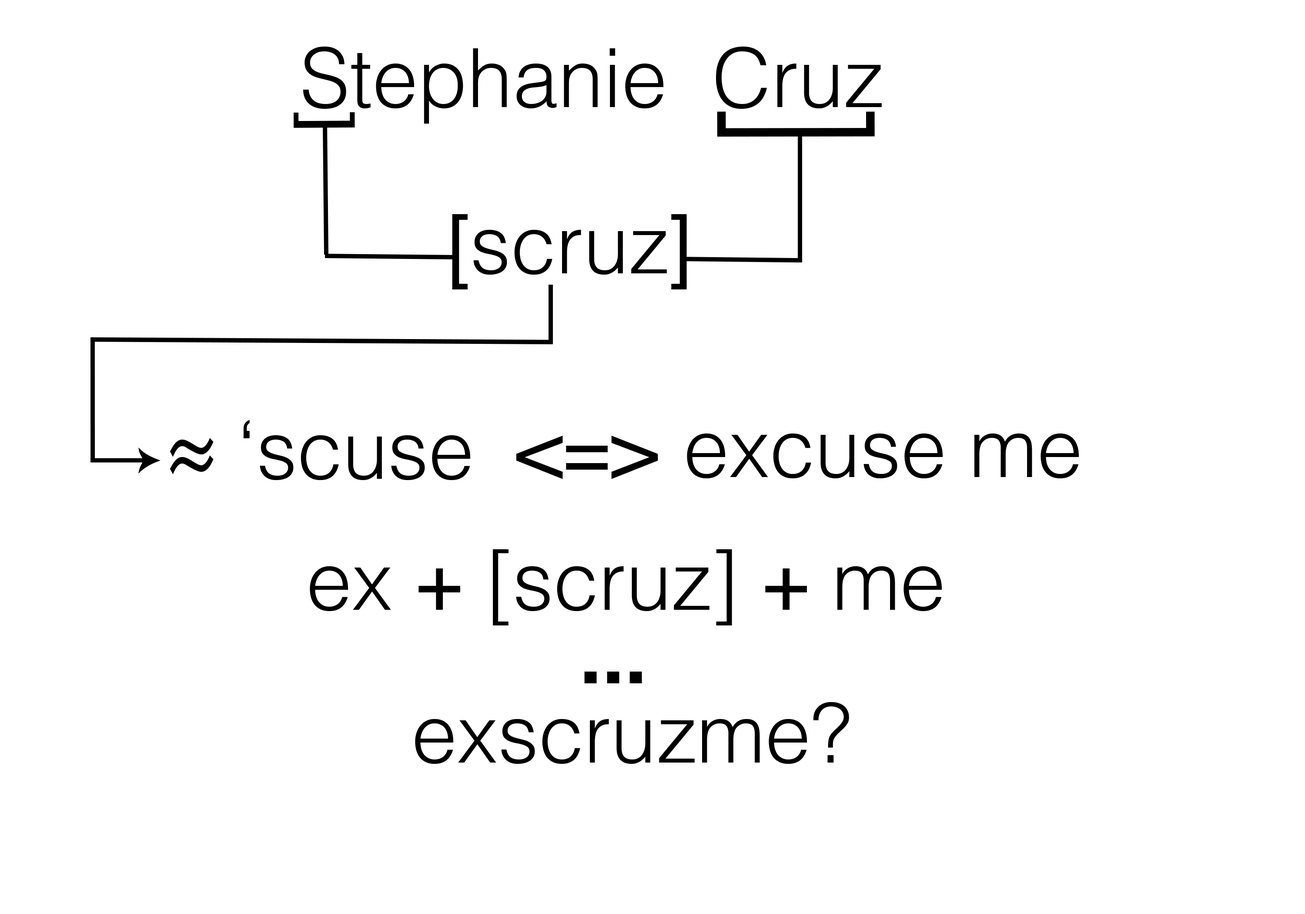
<style>
.page{position:relative;width:1305px;height:914px;background:#ffffff}
.page>*{position:absolute;margin:0}
.t1{font:81.6px "Helvetica-Light";color:#000000}
.t2{font:66.3px "Helvetica";color:#000000;scale:1.23 1}
.t3{font:169.2px "Helvetica-Light";color:#000000;scale:0.77 1}
.t4{font:81.6px "Helvetica";color:#000000}
.t5{font:113.7px "Helvetica-Light";color:#000000;scale:0.76 1}
.t6{font:81.6px "Helvetica-Bold";color:#000000}
</style>
<div class="page">
<p class="t1" style="left:303px;top:47px;width:579px;height:77px">Stephanie  Cruz</p>
<p class="t2" style="left:294px;top:112px;width:61px;height:16px;rotate:-90deg">[</p>
<p class="t3" style="left:717px;top:111px;width:158px;height:26px;rotate:90deg">]</p>
<p class="t1" style="left:452px;top:214px;width:235px;height:75px"><span class="t4">[</span>scruz<span class="t4">]</span></p>
<p class="t1" style="left:243px;top:420px;width:228px;height:60px">‘scuse</p>
<p class="t5" style="left:170px;top:438px;width:44px;height:19px">~</p>
<p class="t4" style="left:516px;top:435px;width:142px;height:44px">&lt;=&gt;</p>
<p class="t1" style="left:687px;top:433px;width:392px;height:45px">excuse me</p>
<p class="t5" style="left:170px;top:455px;width:44px;height:19px">~</p>
<p class="t1" style="left:310px;top:549px;width:632px;height:76px">ex <span class="t4">+</span> [scruz] <span class="t4">+</span> me</p>
<p class="t6" style="left:584px;top:671px;width:58px;height:12px">...</p>
<p class="t1" style="left:415px;top:702px;width:434px;height:62px">exscruzme?</p>
</div>
